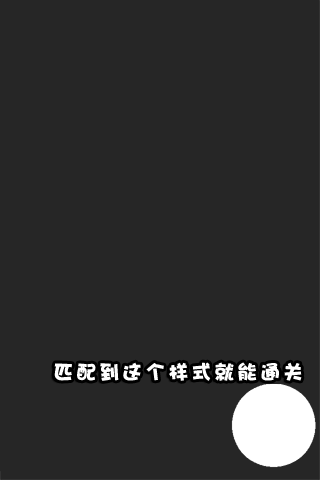
<style>
.page{position:relative;width:320px;height:480px;background:#262626}
.page>*{position:absolute;margin:0}
.t1{font:20px "DFPHaiBaoW12";letter-spacing:0.15em;color:#ffffff}
</style>
<div class="page">
<p class="t1" style="left:54px;top:362px;width:248px;height:19px">匹配到这个样式就能通关</p>
</div>
